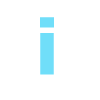
<style>
.page{position:relative;width:100px;height:100px;background:#ffffff}
.page>*{position:absolute;margin:0}
.t1{font:75px "Verdana-Bold";color:#66dcf9}
</style>
<div class="page">
<p class="t1" style="left:40px;top:17px;width:14px;height:58px;opacity:0.95">i</p>
</div>
